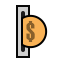
<style>
.page{position:relative;width:64px;height:64px;background:#ffffff}
.page>*{position:absolute;margin:0}
.t1{font:23.7px "Haettenschweiler";letter-spacing:0.01em;color:#89602b}
</style>
<div class="page">
<p class="t1" style="left:26px;top:21px;width:9px;height:21px">$</p>
</div>
